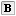
<style>
.page{position:relative;width:16px;height:16px;background:#ffffff}
.page>*{position:absolute;margin:0}
.t1{font:11px "TimesNewRomanPS-BoldMT";color:#000000}
</style>
<div class="page">
<p class="t1" style="left:4px;top:4px;width:7px;height:8px">B</p>
</div>
